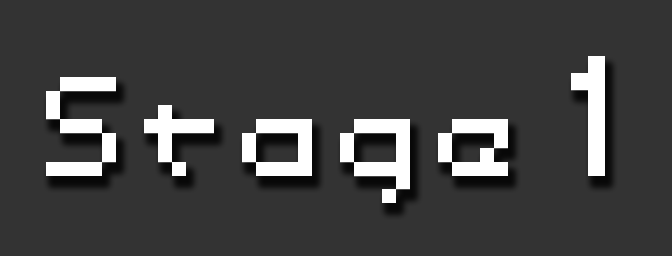
<style>
.page{position:relative;width:672px;height:256px;background:#333333}
.page>*{position:absolute;margin:0}
.t1{font:140px "Dotspitch";letter-spacing:0.1em;color:#ffffff}
.t2{font:170px "Dotspitch";letter-spacing:0.1em;color:#ffffff}
</style>
<div class="page">
<p class="t1" style="left:46px;top:56px;width:559px;height:147px">Stage <span class="t2">1</span></p>
</div>
